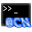
<style>
.page{position:relative;width:32px;height:32px;background:#ffffff}
.page>*{position:absolute;margin:0}
.t1{font:9.8px "BookAntiqua";letter-spacing:0.1em;scale:0.66 1}
</style>
<div class="page">
<p class="t1" style="left:3px;top:6px;width:15px;height:8px">&gt;&gt; _</p>
</div>
